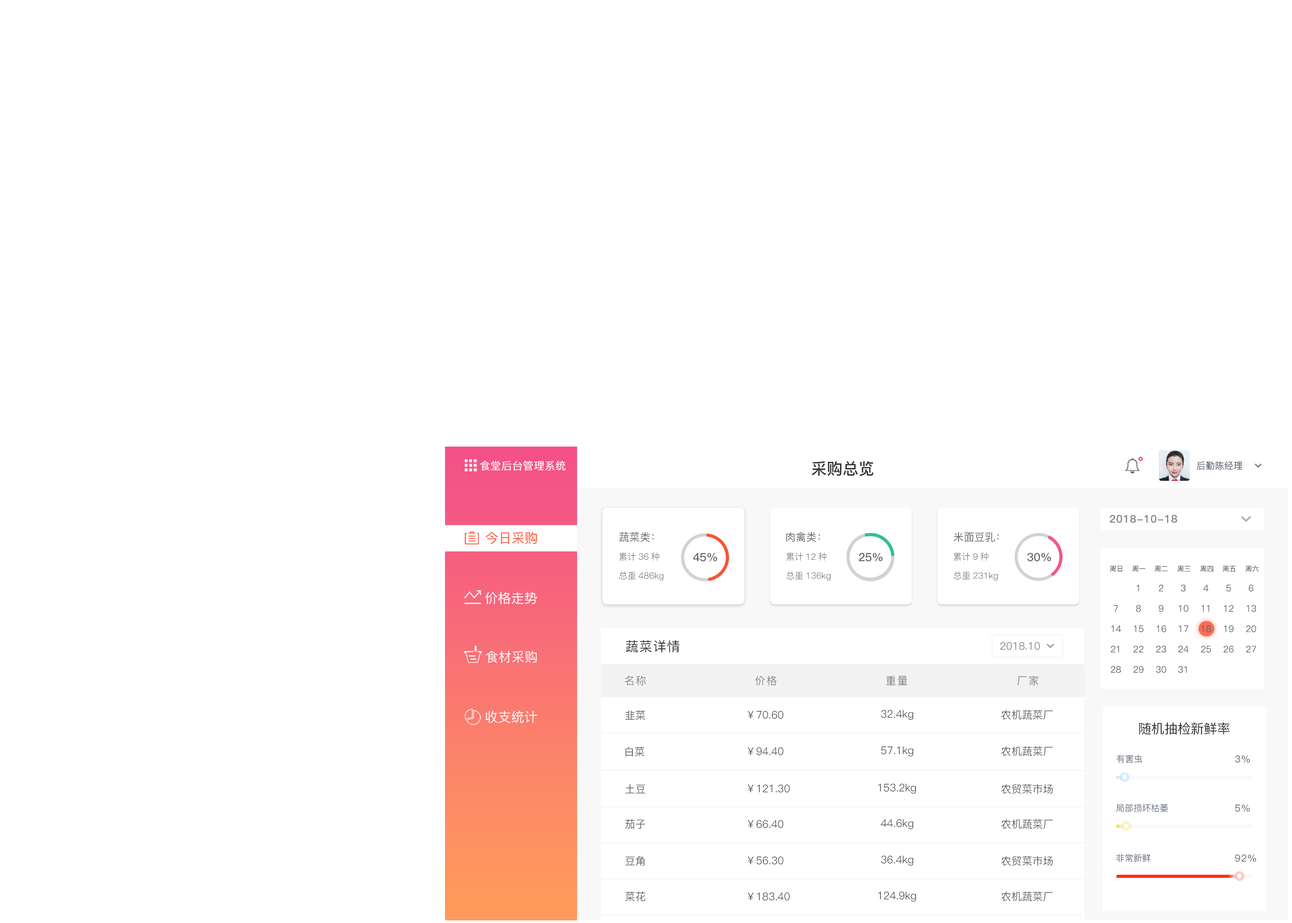
<style>
.page{position:relative;width:1292px;height:923px;background:#ffffff}
.page>*{position:absolute;margin:0}
.t1{font:10.5px "PingFang-SC-Regular";color:#ffffff;font-weight:bold}
.t2{font:15.8px "PingFang-SC-Bold";color:#333333}
.t3{font:9px "PingFang-SC-Light";color:#56606f;font-weight:bold}
.t4{font:10.5px "PingFang-SC-Bold";letter-spacing:0.05em;color:#787878}
.t5{font:13.2px "PingFang-SC-Medium";color:#ff4d30}
.t6{font:10.5px "PingFang-SC-Medium";color:#666666}
.t7{font:8.8px "PingFang-SC-Regular";color:#666666}
.t8{font:11.4px "PingFang-SC-Bold";color:#666666}
.t9{font:6.8px "PingFang-SC-Regular";color:#343434}
.t10{font:13.2px "PingFang-SC-Medium";color:#ffffff}
.t11{font:9px/20.3px "PingFang-SC-Regular";color:#56606f}
.t12{font:13.2px "PingFang-SC-Medium";letter-spacing:0.05em;color:#333333}
.t13{font:10.5px "PingFang-SC-Regular";letter-spacing:0.1em;color:#666666}
.t14{font:10.5px "PingFang-SC-Regular";color:#333333}
.t15{font:13.2px "PingFang-SC-Medium";color:#333333}
.t16{font:8.8px "PingFang-SC-Regular";color:#56606f}
.t17{font:9.7px "PingFang-SC-Medium";letter-spacing:0.05em;color:#666666}
</style>
<div class="page">
<p class="t1" style="left:480px;top:461px;width:86px;height:10px">食堂后台管理系统</p>
<p class="t2" style="left:811px;top:461px;width:62px;height:15px">采购总览</p>
<p class="t3" style="left:1196px;top:461px;width:46px;height:9px">后勤陈经理</p>
<p class="t4" style="left:1110px;top:515px;width:67px;height:8px;opacity:0.9">2018-10-18</p>
<p class="t5" style="left:485px;top:532px;width:52px;height:12px">今日采购</p>
<p class="t6" style="left:619px;top:532px;width:35px;height:10px">蔬菜类：</p>
<p class="t6" style="left:786px;top:532px;width:34px;height:10px">肉禽类：</p>
<p class="t6" style="left:953px;top:532px;width:46px;height:10px">米面豆乳：</p>
<p class="t7" style="left:619px;top:552px;width:40px;height:9px">累计36种</p>
<p class="t8" style="left:693px;top:553px;width:24px;height:9px">45%</p>
<p class="t7" style="left:786px;top:552px;width:40px;height:9px">累计12种</p>
<p class="t8" style="left:859px;top:553px;width:23px;height:9px">25%</p>
<p class="t7" style="left:953px;top:552px;width:35px;height:9px">累计9种</p>
<p class="t8" style="left:1027px;top:553px;width:24px;height:9px">30%</p>
<p class="t9" style="left:1110px;top:566px;width:12px;height:6px">周日</p>
<p class="t9" style="left:1132px;top:566px;width:13px;height:6px">周一</p>
<p class="t9" style="left:1154px;top:566px;width:14px;height:6px">周二</p>
<p class="t9" style="left:1177px;top:566px;width:13px;height:6px">周三</p>
<p class="t9" style="left:1200px;top:566px;width:13px;height:6px">周四</p>
<p class="t9" style="left:1222px;top:566px;width:14px;height:6px">周五</p>
<p class="t9" style="left:1245px;top:566px;width:13px;height:6px">周六</p>
<p class="t7" style="left:619px;top:571px;width:44px;height:10px">总重486kg</p>
<p class="t7" style="left:786px;top:571px;width:45px;height:10px">总重136kg</p>
<p class="t7" style="left:953px;top:571px;width:45px;height:10px">总重231kg</p>
<p class="t10" style="left:485px;top:592px;width:52px;height:12px">价格走势</p>
<p class="t11" style="left:1133px;top:585px;width:10px;height:88px;text-align:center">1<br>8<br>15<br>22<br>29</p>
<p class="t11" style="left:1156px;top:584px;width:10px;height:89px;text-align:center">2<br>9<br>16<br>23<br>30</p>
<p class="t11" style="left:1178px;top:584px;width:11px;height:89px;text-align:center">3<br>10<br>17<br>24<br>31</p>
<p class="t11" style="left:1201px;top:585px;width:10px;height:68px;text-align:center">4<br>11<br>18<br>25</p>
<p class="t11" style="left:1223px;top:585px;width:10px;height:68px;text-align:center">5<br>12<br>19<br>26</p>
<p class="t11" style="left:1246px;top:584px;width:10px;height:69px;text-align:center">6<br>13<br>20<br>27</p>
<p class="t11" style="left:1110px;top:605px;width:11px;height:68px;text-align:center">7<br>14<br>21<br>28</p>
<p class="t12" style="left:626px;top:640px;width:54px;height:12px">蔬菜详情</p>
<p class="t10" style="left:485px;top:651px;width:52px;height:12px">食材采购</p>
<p class="t13" style="left:624px;top:676px;width:22px;height:10px">名称</p>
<p class="t13" style="left:755px;top:676px;width:22px;height:10px">价格</p>
<p class="t13" style="left:886px;top:676px;width:21px;height:9px">重量</p>
<p class="t13" style="left:1017px;top:676px;width:21px;height:10px">厂家</p>
<p class="t10" style="left:485px;top:711px;width:52px;height:12px">收支统计</p>
<p class="t6" style="left:625px;top:710px;width:20px;height:10px">韭菜</p>
<p class="t14" style="left:748px;top:711px;width:35px;height:8px">￥70.60</p>
<p class="t14" style="left:881px;top:710px;width:32px;height:10px">32.4kg</p>
<p class="t6" style="left:1001px;top:710px;width:52px;height:10px">农机蔬菜厂</p>
<p class="t15" style="left:1139px;top:722px;width:90px;height:13px">随机抽检新鲜率</p>
<p class="t6" style="left:625px;top:747px;width:20px;height:10px">白菜</p>
<p class="t14" style="left:748px;top:747px;width:35px;height:9px">￥94.40</p>
<p class="t14" style="left:881px;top:746px;width:32px;height:10px">57.1kg</p>
<p class="t6" style="left:1001px;top:746px;width:52px;height:10px">农机蔬菜厂</p>
<p class="t16" style="left:1116px;top:755px;width:26px;height:8px">有害虫</p>
<p class="t17" style="left:1235px;top:755px;width:15px;height:8px">3%</p>
<p class="t6" style="left:625px;top:784px;width:20px;height:10px">土豆</p>
<p class="t14" style="left:748px;top:784px;width:42px;height:9px">￥121.30</p>
<p class="t14" style="left:878px;top:784px;width:38px;height:10px">153.2kg</p>
<p class="t6" style="left:1001px;top:784px;width:52px;height:10px">农贸菜市场</p>
<p class="t16" style="left:1116px;top:804px;width:52px;height:9px">局部损坏枯萎</p>
<p class="t17" style="left:1235px;top:805px;width:15px;height:7px">5%</p>
<p class="t6" style="left:625px;top:819px;width:20px;height:10px">茄子</p>
<p class="t14" style="left:748px;top:820px;width:35px;height:8px">￥66.40</p>
<p class="t14" style="left:881px;top:819px;width:32px;height:10px">44.6kg</p>
<p class="t6" style="left:1001px;top:819px;width:52px;height:10px">农机蔬菜厂</p>
<p class="t6" style="left:625px;top:856px;width:20px;height:10px">豆角</p>
<p class="t14" style="left:748px;top:856px;width:35px;height:9px">￥56.30</p>
<p class="t14" style="left:881px;top:856px;width:32px;height:10px">36.4kg</p>
<p class="t6" style="left:1001px;top:856px;width:52px;height:10px">农贸菜市场</p>
<p class="t16" style="left:1116px;top:854px;width:34px;height:9px">非常新鲜</p>
<p class="t17" style="left:1235px;top:854px;width:21px;height:8px">92%</p>
<p class="t6" style="left:625px;top:892px;width:20px;height:10px">菜花</p>
<p class="t14" style="left:748px;top:892px;width:42px;height:9px">￥183.40</p>
<p class="t14" style="left:878px;top:892px;width:38px;height:10px">124.9kg</p>
<p class="t6" style="left:1001px;top:892px;width:52px;height:10px">农机蔬菜厂</p>
</div>
